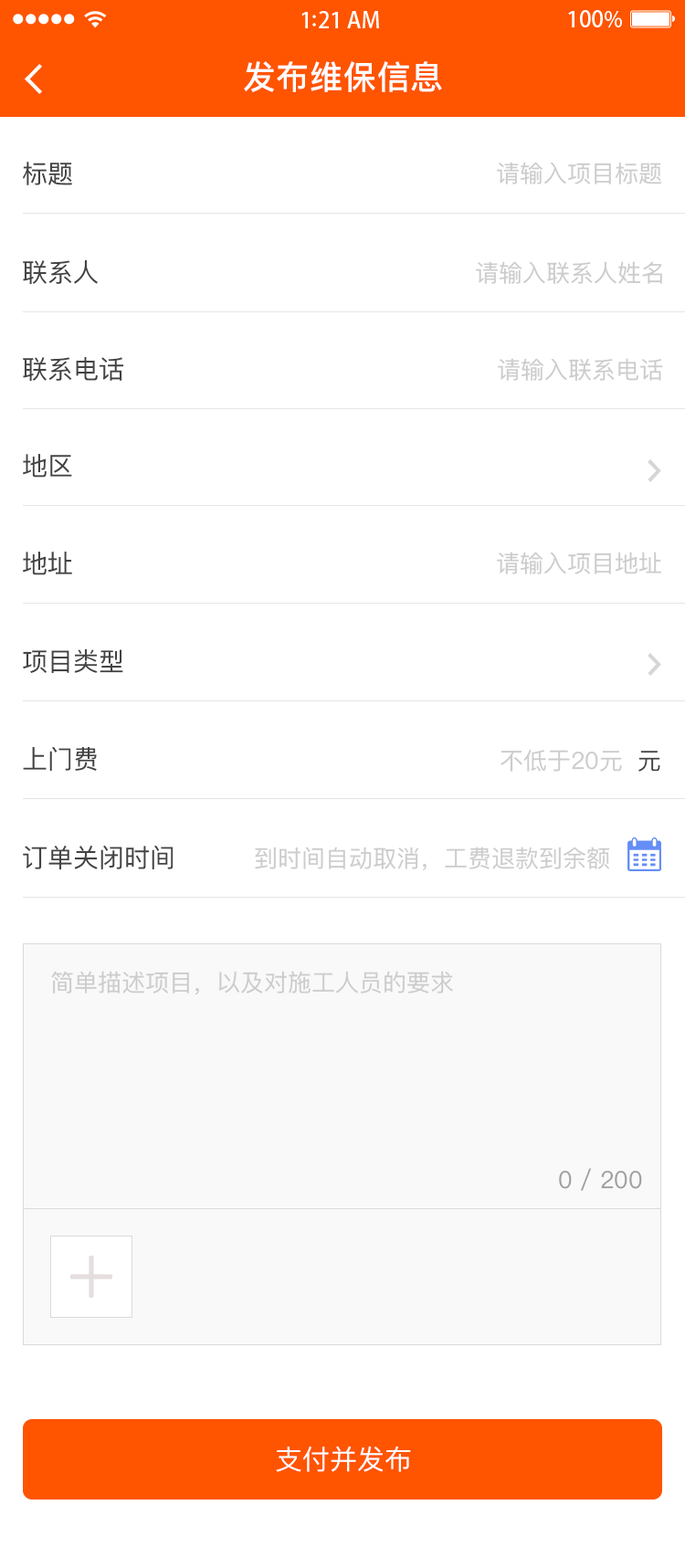
<style>
.page{position:relative;width:685px;height:1568px;background:#ffffff}
.page>*{position:absolute;margin:0}
.t1{font:32.9px "PingFangSC-Medium";letter-spacing:0.02em;color:#ffffff}
.t2{font:25.6px "PingFangSC-Regular";color:#434343}
.t3{font:23.7px "PingFangSC-Regular";color:#cccccc}
.t4{font:23.7px "PingFangSC-Regular";color:#434343}
.t5{font:23.7px "PingFangSC-Regular";color:#a0a0a0}
.t6{font:27.4px "PingFangSC-Regular";color:#ffffff;text-transform:uppercase}
</style>
<div class="page">
<p class="t1" style="left:244px;top:61px;width:198px;height:31px">发布维保信息</p>
<p class="t2" style="left:23px;top:162px;width:49px;height:23px">标题</p>
<p class="t3" style="left:497px;top:162px;width:164px;height:22px">请输入项目标题</p>
<p class="t2" style="left:23px;top:260px;width:75px;height:25px">联系人</p>
<p class="t3" style="left:476px;top:261px;width:186px;height:23px">请输入联系人姓名</p>
<p class="t2" style="left:23px;top:357px;width:101px;height:25px">联系电话</p>
<p class="t3" style="left:498px;top:358px;width:165px;height:23px">请输入联系电话</p>
<p class="t2" style="left:23px;top:454px;width:49px;height:24px">地区</p>
<p class="t2" style="left:23px;top:552px;width:49px;height:23px">地址</p>
<p class="t3" style="left:497px;top:552px;width:164px;height:22px">请输入项目地址</p>
<p class="t2" style="left:23px;top:649px;width:100px;height:24px">项目类型</p>
<p class="t2" style="left:23px;top:746px;width:74px;height:25px">上门费</p>
<p class="t3" style="left:500px;top:749px;width:122px;height:23px">不低于20元</p>
<p class="t4" style="left:638px;top:751px;width:22px;height:21px">元</p>
<p class="t2" style="left:23px;top:845px;width:151px;height:24px">订单关闭时间</p>
<p class="t3" style="left:255px;top:847px;width:355px;height:24px">到时间自动取消，工费退款到余额</p>
<p class="t3" style="left:51px;top:971px;width:402px;height:24px">简单描述项目，以及对施工人员的要求</p>
<p class="t5" style="left:559px;top:1168px;width:83px;height:23px">0 / 200</p>
<p class="t6" style="left:276px;top:1446px;width:135px;height:26px">支付并发布</p>
</div>
